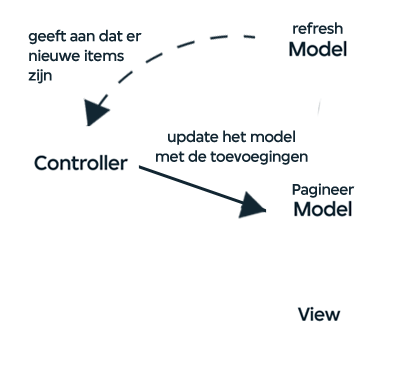
<style>
.page{position:relative;width:400px;height:383px;background:#ffffff}
.page>*{position:absolute;margin:0}
.t1{font:16.5px "VPROThonikBold-Medium";letter-spacing:-0.025em;color:#122632}
</style>
<div class="page">
<p class="t1" style="left:28px;top:29px;width:114px;height:55px">geeft aan dat er<br>nieuwe items<br>zijn</p>
<p class="t1" style="left:293px;top:22px;width:50px;height:12px">refresh</p>
<p class="t1" style="left:156px;top:130px;width:152px;height:35px;text-align:center">update het model<br>met de toevoegingen</p>
<p class="t1" style="left:292px;top:183px;width:63px;height:15px">Pagineer</p>
</div>
